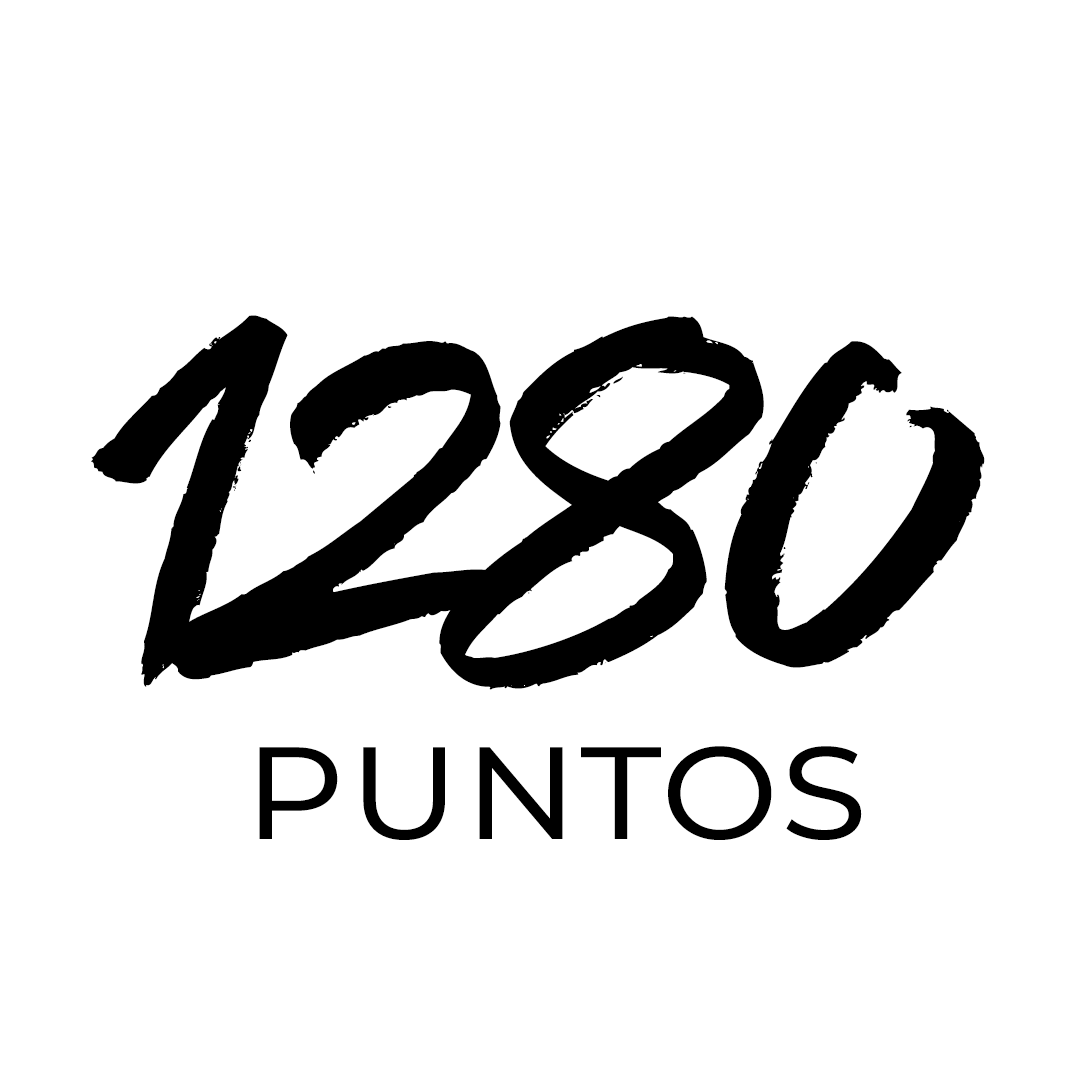
<style>
.page{position:relative;width:1080px;height:1080px;background:#ffffff}
.page>*{position:absolute;margin:0}
.t1{font:638px "HaveHeartOne";color:#000000;font-variant:small-caps;scale:1.05 1}
.t2{font:162px "Montserrat-Regular";color:#000000;font-variant:small-caps;scale:1.05 1}
</style>
<div class="page">
<p class="t1" style="left:91px;top:315px;width:894px;height:375px">1280</p>
<p class="t2" style="left:259px;top:746px;width:603px;height:94px">puntos</p>
</div>
